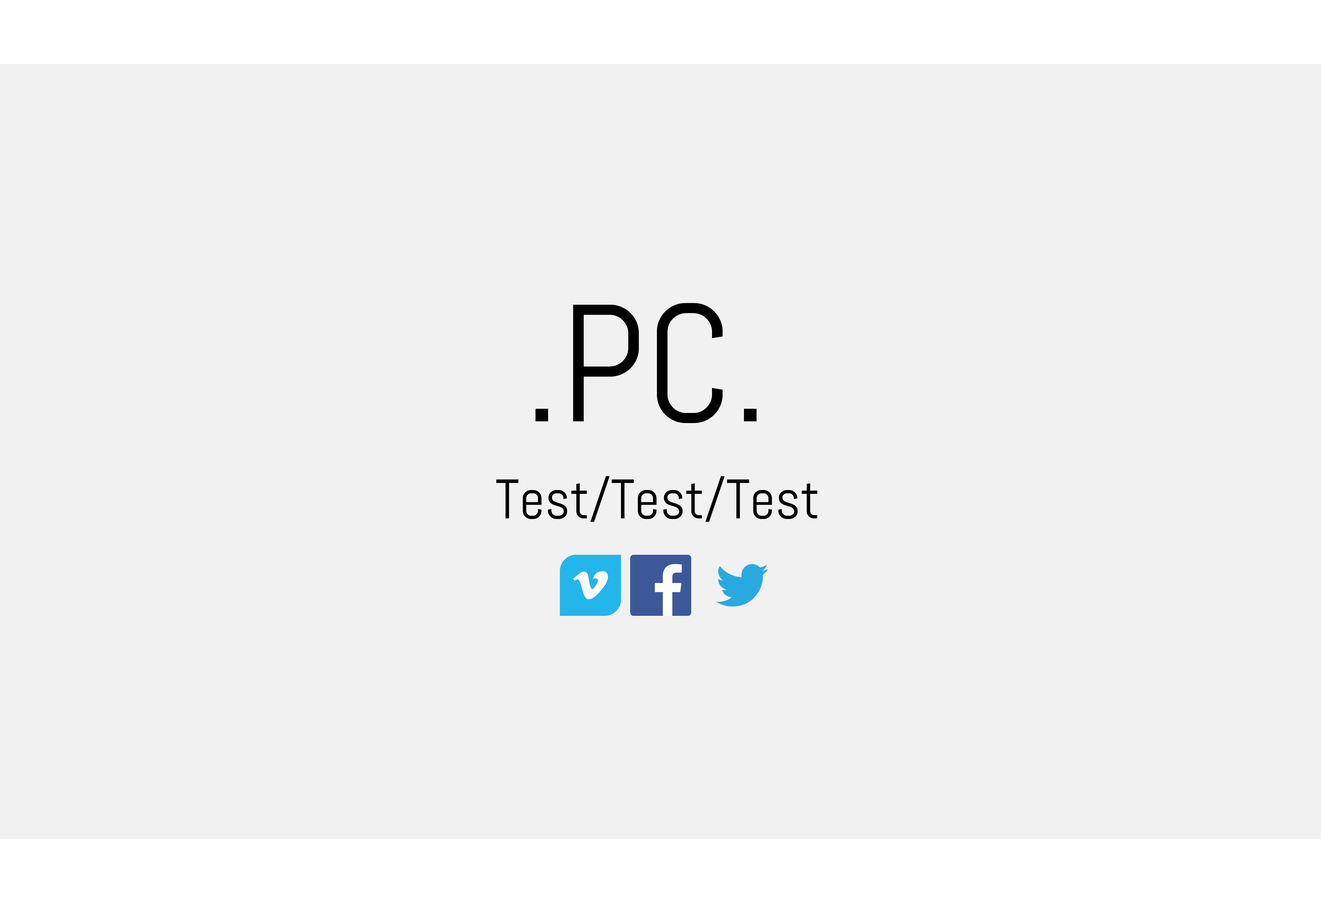
<style>
.page{position:relative;width:1321px;height:903px;background:#f1f1f1}
.page>*{position:absolute;margin:0}
.t1{font:166.4px "Abel-Regular";color:#000000}
.t2{font:55.5px "Abel-Regular";color:#000000}
</style>
<div class="page">
<p class="t1" style="left:535px;top:303px;width:222px;height:120px">.PC.</p>
<p class="t2" style="left:496px;top:476px;width:321px;height:46px">Test/Test/Test</p>
</div>
